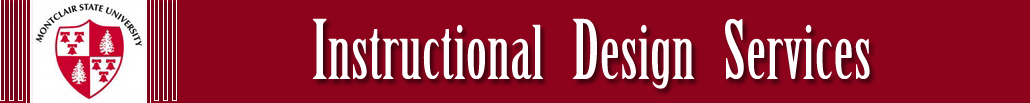
<style>
.page{position:relative;width:1030px;height:103px;background:#8d031c}
.page>*{position:absolute;margin:0}
.t1{font:12px "MyriadPro-Regular";letter-spacing:0.01em;color:#000000}
.t2{font:80px "MyriadPro-Regular";letter-spacing:0.01em;color:#000000}
.t3{font:80px "MyriadPro-Regular";letter-spacing:0.01em;color:#fdfbfb}
.t4{font:12px "MyriadPro-Regular";letter-spacing:0.01em;color:#fdfbfb}
</style>
<div class="page">
<p class="t1" style="left:312px;top:18px;width:558px;height:71px"><span class="t2">I</span>nstructional   <span class="t3">D</span><span class="t4">esign   </span><span class="t2">S</span>ervices</p>
</div>
